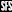
<style>
.page{position:relative;width:12px;height:12px;background:#000000}
.page>*{position:absolute;margin:0}
.t1{font:14px "SFMoviePosterCondensed";color:#ffffff;font-weight:bold;scale:1.55 1}
</style>
<div class="page">
<p class="t1" style="left:1px;top:1px;width:11px;height:10px">SFS</p>
</div>
